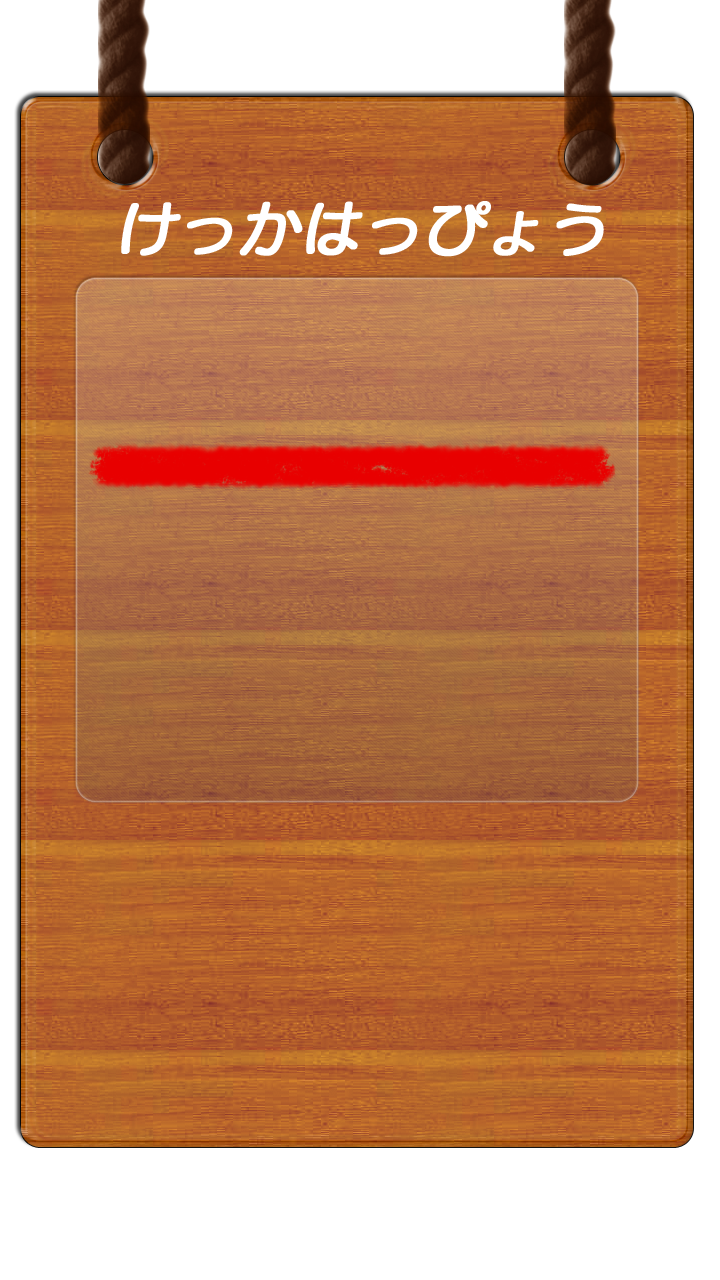
<style>
.page{position:relative;width:720px;height:1280px;background:#ffffff}
.page>*{position:absolute;margin:0}
.t1{font:60px "SeuratPro-DB";color:#ffffff;font-weight:bold;font-style:italic}
</style>
<div class="page">
<p class="t1" style="left:121px;top:201px;width:483px;height:56px">けっかはっぴょう</p>
</div>
